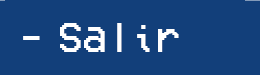
<style>
.page{position:relative;width:260px;height:75px;background:#123f7a}
.page>*{position:absolute;margin:0}
.t1{font:41.7px "VCROSDMono";color:#ffffff}
</style>
<div class="page">
<p class="t1" style="left:60px;top:23px;width:119px;height:29px">Salir</p>
<p class="t1" style="left:23px;top:36px;width:17px;height:4px">-</p>
</div>
